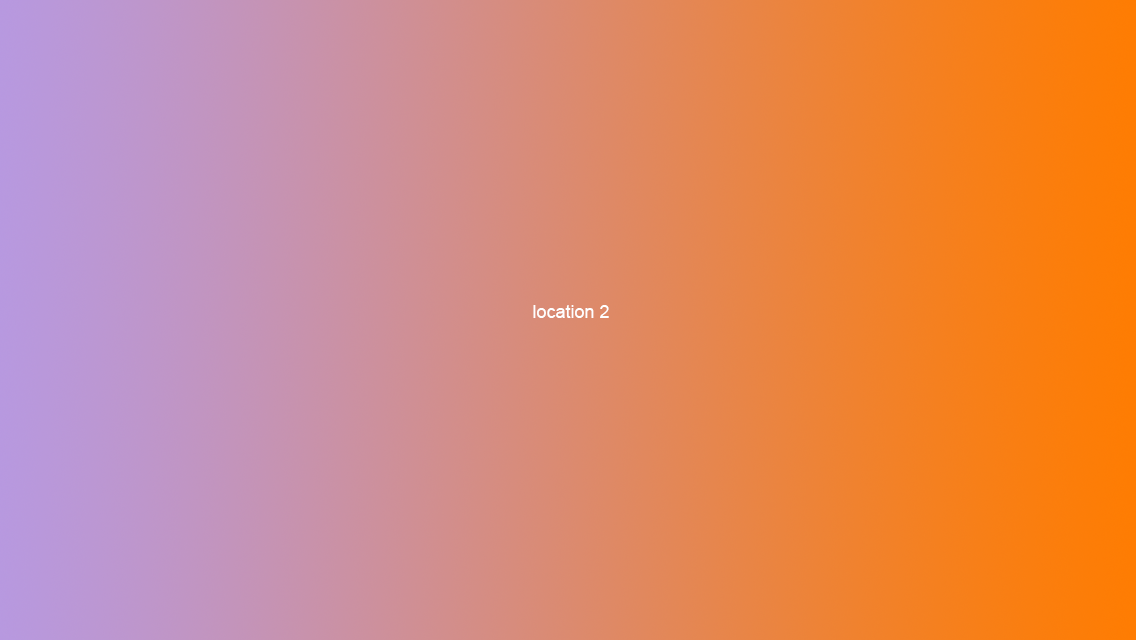
<style>
.page{position:relative;width:1136px;height:640px}
.page>*{position:absolute;margin:0}
.t1{font:18px "ArialMT";color:#ffffff}
</style>
<div class="page">
<p class="t1" style="left:533px;top:305px;width:76px;height:13px">location 2</p>
</div>
